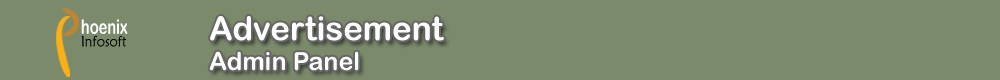
<style>
.page{position:relative;width:1000px;height:80px;background:#7b8a6b}
.page>*{position:absolute;margin:0}
.t1{font:33px "ArialRoundedMTBold";color:#fefefe}
.t2{font:25px "ArialRoundedMTBold";color:#fefefe}
.t3{font:20.1px "ArialRoundedMTBold";color:#fefefe;scale:0.73 1}
.t4{font:15.1px "MaiandraGD-Regular";color:#000000;scale:0.91 1}
</style>
<div class="page">
<p class="t1" style="left:209px;top:16px;width:235px;height:55px">Advertisement<br><span class="t2">Admin Panel</span></p>
<p class="t3" style="left:81px;top:19px;width:47px;height:15px">hoenix</p>
<p class="t4" style="left:81px;top:35px;width:45px;height:12px">Infosoft</p>
</div>
